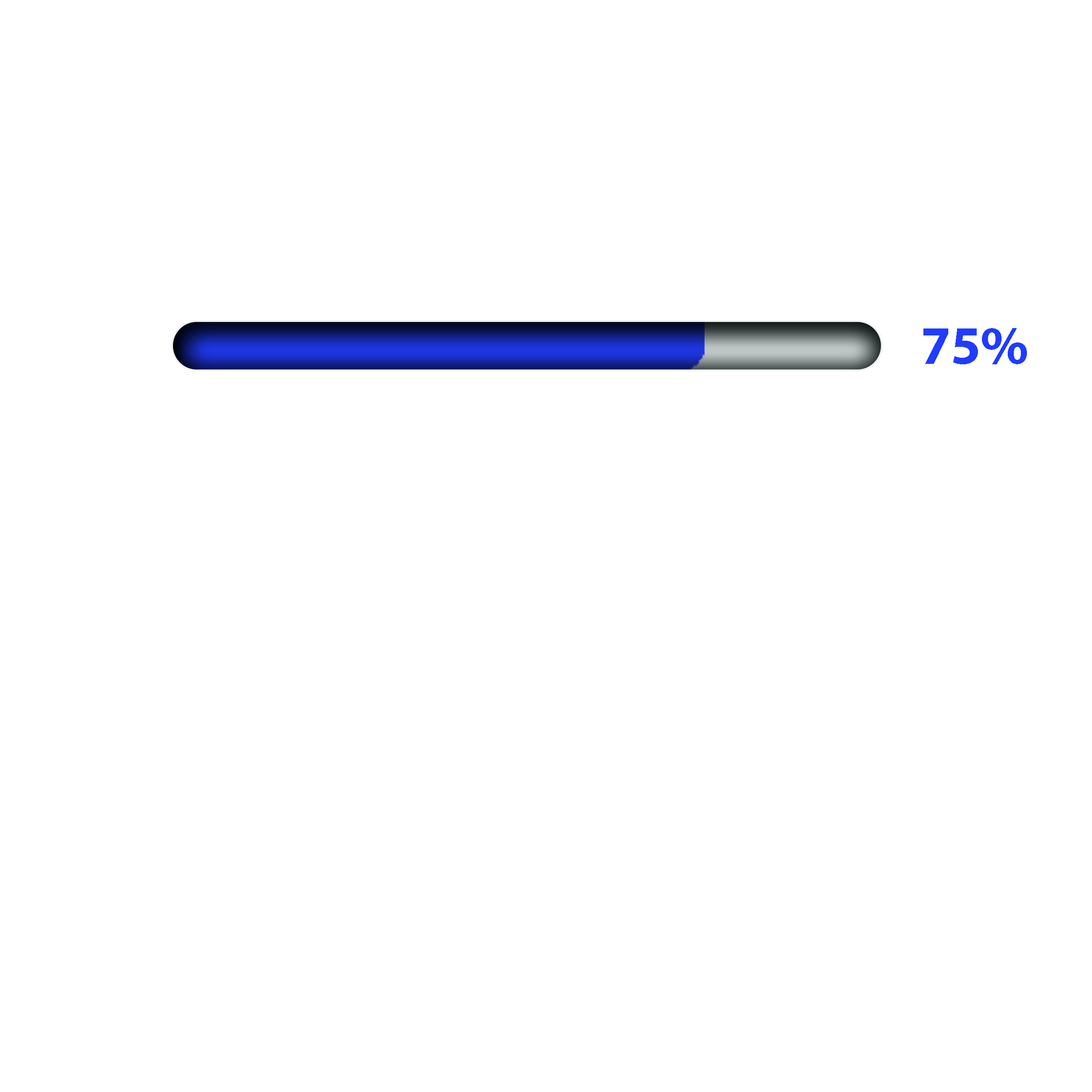
<style>
.page{position:relative;width:1092px;height:1092px;background:#ffffff}
.page>*{position:absolute;margin:0}
.t1{font:54.6px "MyriadPro-Bold";color:#203cff}
</style>
<div class="page">
<p class="t1" style="left:923px;top:328px;width:104px;height:36px">75%</p>
</div>
